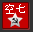
<style>
.page{position:relative;width:33px;height:32px;background:#c50000}
.page>*{position:absolute;margin:0}
.t1{font:10.8px "SimSun";color:#ffffff}
</style>
<div class="page">
<p class="t1" style="left:5px;top:4px;width:20px;height:10px">空七</p>
</div>
